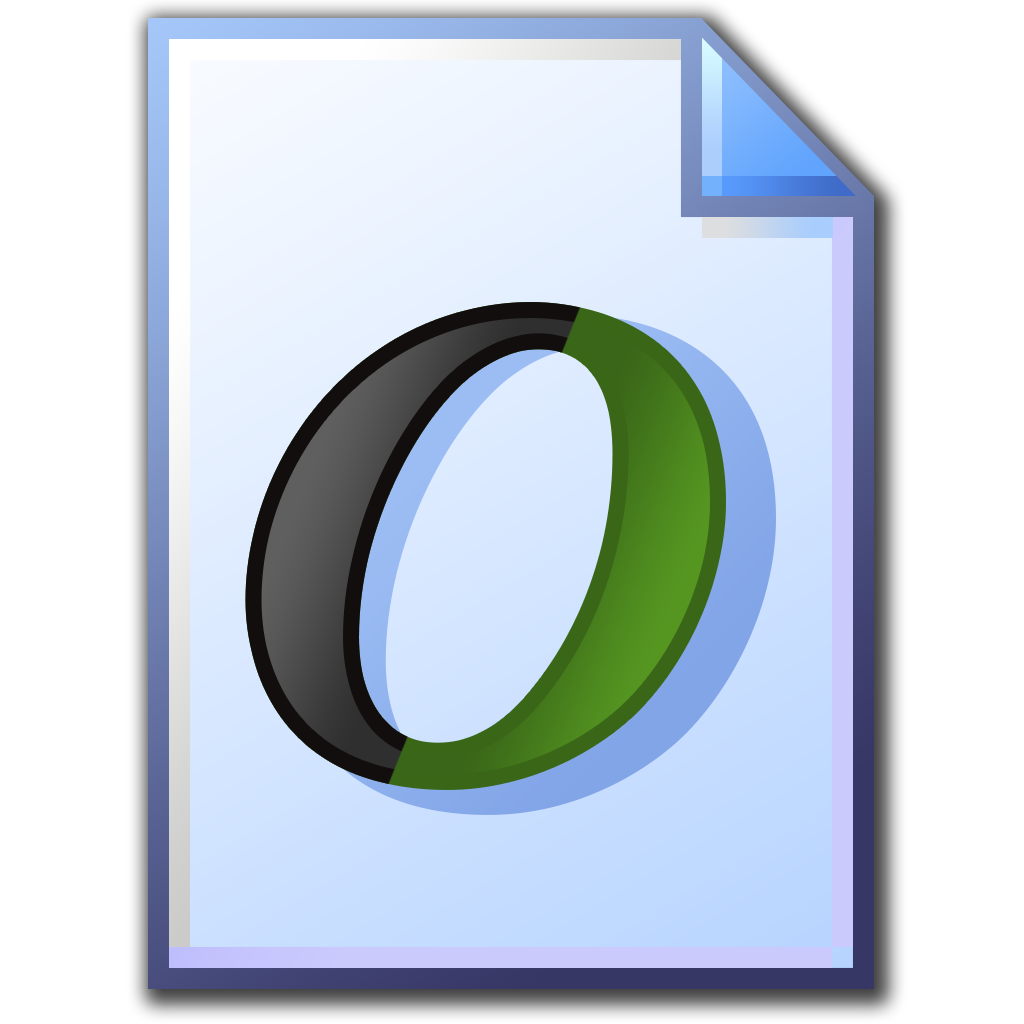
<style>
.page{position:relative;width:1024px;height:1024px;background:#ffffff}
.page>*{position:absolute;margin:0}
.t1{font:681.4px "AGaramondPro-BoldItalic"}
.t2{font:725px "AGaramondPro-BoldItalic"}
</style>
<div class="page">
<p class="t1" style="left:253px;top:310px;width:465px;height:472px">O</p>
<p class="t2" style="left:282px;top:315px;width:494px;height:500px">O</p>
</div>
